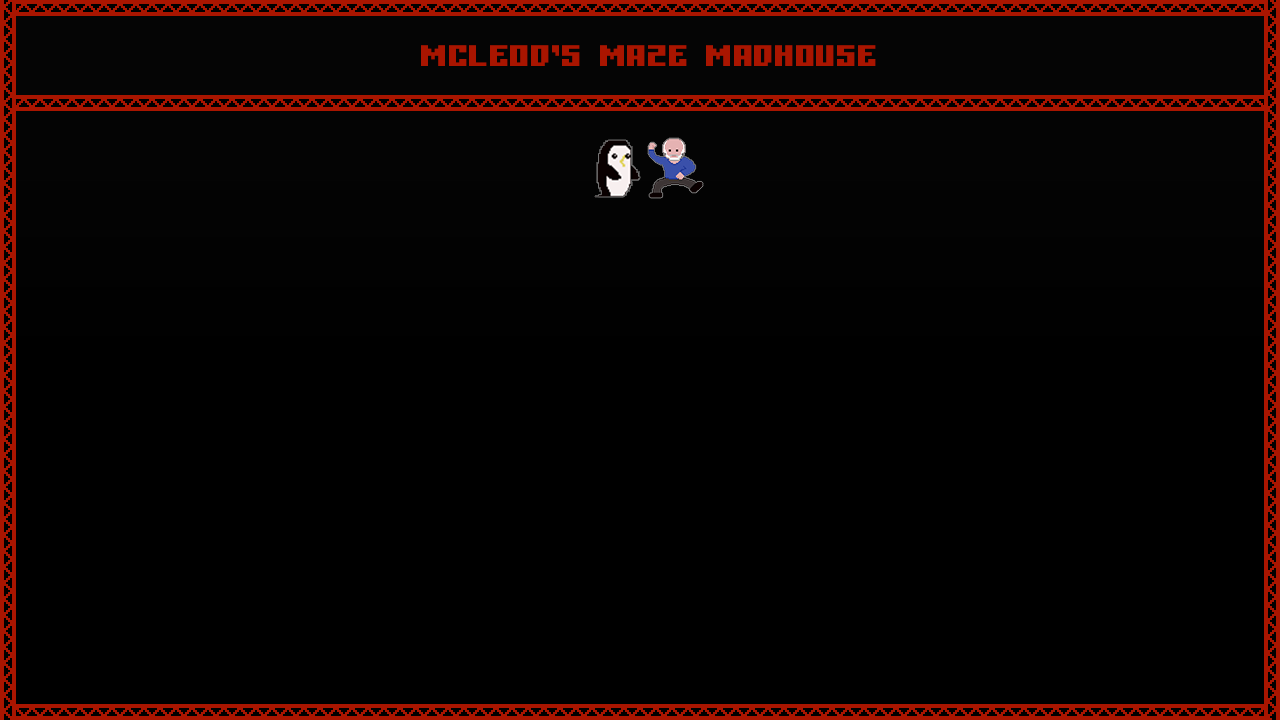
<style>
.page{position:relative;width:1280px;height:720px;background:#000000}
.page>*{position:absolute;margin:0}
.t1{font:55px "Gamer";color:#a91500}
</style>
<div class="page">
<p class="t1" style="left:421px;top:45px;width:455px;height:21px">MCLEOD’S MAZE MADHOUSE</p>
</div>
